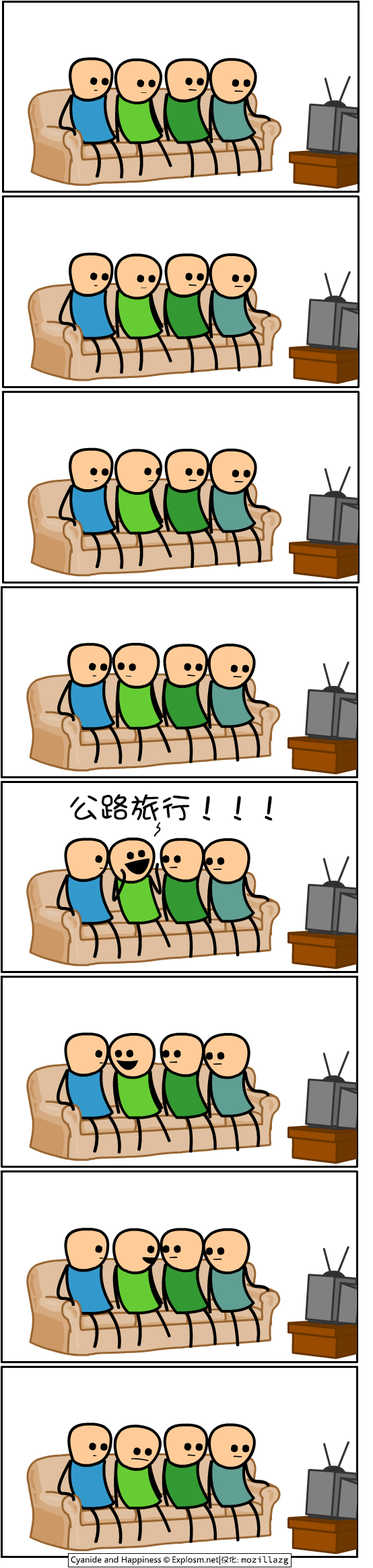
<style>
.page{position:relative;width:373px;height:1568px;background:#ffffff}
.page>*{position:absolute;margin:0}
.t1{font:31px "DFGirl";color:#000000}
</style>
<div class="page">
<p class="t1" style="left:70px;top:794px;width:203px;height:27px">公路旅行！！！</p>
</div>
